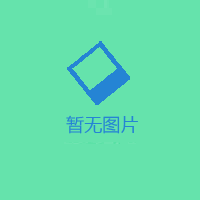
<style>
.page{position:relative;width:200px;height:200px;background:#65e3ac}
.page>*{position:absolute;margin:0}
.t1{font:18px "MicrosoftYaHei";color:#2584d4}
</style>
<div class="page">
<p class="t1" style="left:66px;top:115px;width:72px;height:19px">暂无图片</p>
</div>
